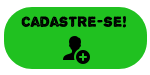
<style>
.page{position:relative;width:150px;height:75px;background:#20c120}
.page>*{position:absolute;margin:0}
.t1{font:15.5px "AlphaEcho";color:#000000}
</style>
<div class="page">
<p class="t1" style="left:21px;top:16px;width:106px;height:12px">cadastre-se!</p>
</div>
